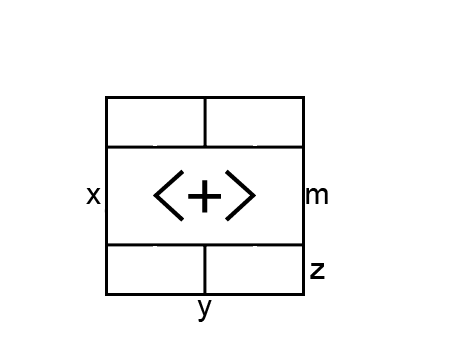
<style>
.page{position:relative;width:454px;height:340px;background:#ffffff}
.page>*{position:absolute;margin:0}
.t1{font:72px "SimHei";color:#000000}
.t2{font:30px "ArialMT";color:#000000}
</style>
<div class="page">
<p class="t1" style="left:153px;top:169px;width:103px;height:53px;rotate:180deg">&lt;+&gt;</p>
<p class="t2" style="left:86px;top:188px;width:15px;height:16px">x</p>
<p class="t2" style="left:306px;top:188px;width:22px;height:16px">m</p>
<p class="t2" style="left:310px;top:263px;width:15px;height:16px">z</p>
<p class="t2" style="left:197px;top:300px;width:15px;height:22px">y</p>
</div>
